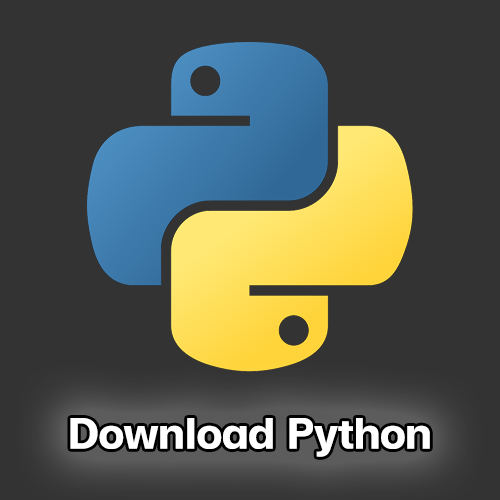
<style>
.page{position:relative;width:500px;height:500px;background:#333333}
.page>*{position:absolute;margin:0}
.t1{font:60px "FCMinimalBold";color:#ffffff}
</style>
<div class="page">
<p class="t1" style="left:70px;top:418px;width:360px;height:39px">Download Python</p>
</div>
